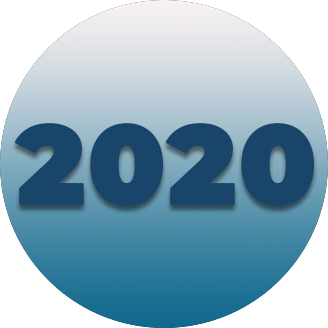
<style>
.page{position:relative;width:328px;height:328px;background:#ffffff}
.page>*{position:absolute;margin:0}
.t1{font:111.8px "Montserrat-Black";color:#19456b;font-weight:bold}
</style>
<div class="page">
<p class="t1" style="left:14px;top:123px;width:301px;height:83px">2020</p>
</div>
